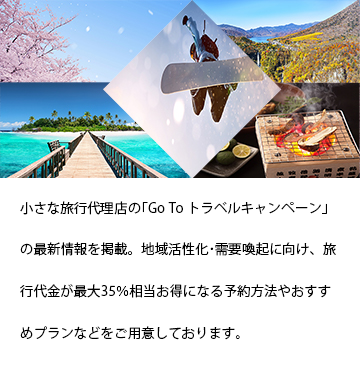
<style>
.page{position:relative;width:360px;height:370px;background:#ffffff}
.page>*{position:absolute;margin:0}
.t1{font:13.3px/41.7px "KozGoPr6N-Regular";letter-spacing:0.01em;color:#000000}
</style>
<div class="page">
<p class="t1" style="left:20px;top:201px;width:316px;height:139px">小さな旅行代理店の｢Go To トラベルキャンペーン｣の最新情報を掲載。地域活性化･需要喚起に向け、旅行代金が最大35％相当お得になる予約方法やおすすめプランなどをご用意しております。</p>
</div>
